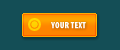
<style>
.page{position:relative;width:120px;height:50px;background:#144e56}
.page>*{position:absolute;margin:0}
.t1{font:9px "MyriadPro-BlackCond";color:#ffffff;text-transform:uppercase}
</style>
<div class="page">
<p class="t1" style="left:51px;top:22px;width:35px;height:7px">your text</p>
</div>
